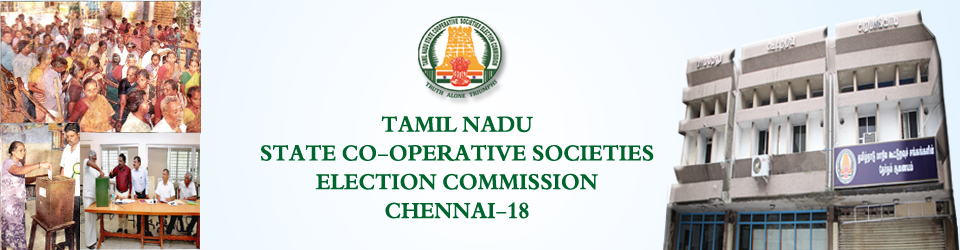
<style>
.page{position:relative;width:960px;height:250px}
.page>*{position:absolute;margin:0}
.t1{font:24px "TraditionalArabic-Bold";color:#00652d;scale:0.94 1}
</style>
<div class="page">
<p class="t1" style="left:261px;top:116px;width:393px;height:103px;text-align:center">TAMIL NADU<br>STATE CO-OPERATIVE SOCIETIES<br>ELECTION COMMISSION<br>CHENNAI-18</p>
</div>
